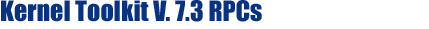
<style>
.page{position:relative;width:429px;height:29px;background:#ffffff}
.page>*{position:absolute;margin:0}
.t1{font:26px "Impact";color:#093282}
</style>
<div class="page">
<p class="t1" style="left:1px;top:0px;width:261px;height:22px">Kernel Toolkit V. 7.3 RPCs</p>
</div>
